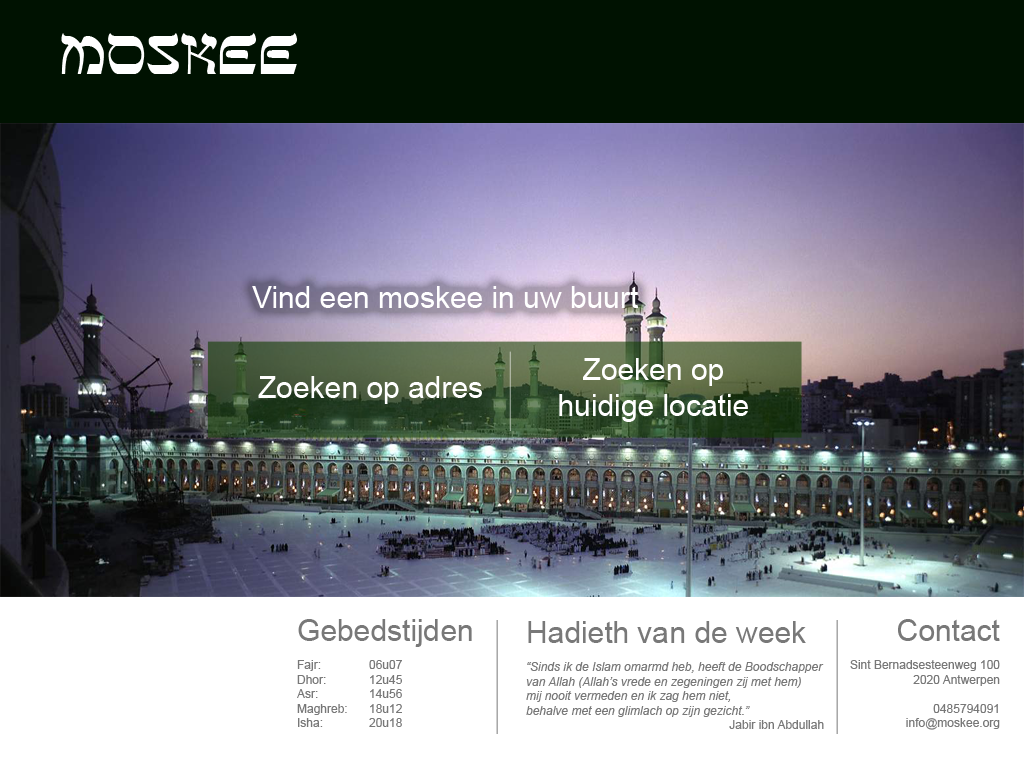
<style>
.page{position:relative;width:1024px;height:768px;background:#ffffff}
.page>*{position:absolute;margin:0}
.t1{font:60px "SeferAH";color:#ffffff}
.t2{font:30px "ArialMT";color:#ffffff}
.t3{font:12px "ArialMT";color:#787878}
.t4{font:30px "ArialMT";color:#787878}
.t5{font:12px "Arial-ItalicMT";color:#787878}
</style>
<div class="page">
<p class="t1" style="left:61px;top:33px;width:236px;height:41px">Moskee</p>
<p class="t2" style="left:252px;top:286px;width:386px;height:22px">Vind een moskee in uw buurt</p>
<p class="t2" style="left:559px;top:358px;width:189px;height:64px;text-align:center">Zoeken op<br>huidige locatie</p>
<p class="t2" style="left:258px;top:376px;width:224px;height:28px">Zoeken op adres</p>
<p class="t3" style="left:297px;top:619px;width:175px;height:108px"><span class="t4">Gebedstijden<br></span><br>Fajr:  06u07<br>Dhor:  12u45<br>Asr:  14u56<br>Maghreb: 18u12<br>Isha:  20u18</p>
<p class="t5" style="left:526px;top:621px;width:298px;height:108px"><span class="t4">Hadieth van de week<br><br></span>“Sinds ik de Islam omarmd heb, heeft de Boodschapper <br>van Allah (Allah’s vrede en zegeningen zij met hem) <br>mij nooit vermeden en ik zag hem niet, <br>behalve met een glimlach op zijn gezicht.”<br><span class="t3">            Jabir ibn Abdullah</span></p>
<p class="t3" style="left:850px;top:619px;width:150px;height:111px;text-align:right"><span class="t4">Contact<br></span><br>Sint Bernadsesteenweg 100<br>2020 Antwerpen<br><br>0485794091<br>info@moskee.org</p>
</div>
